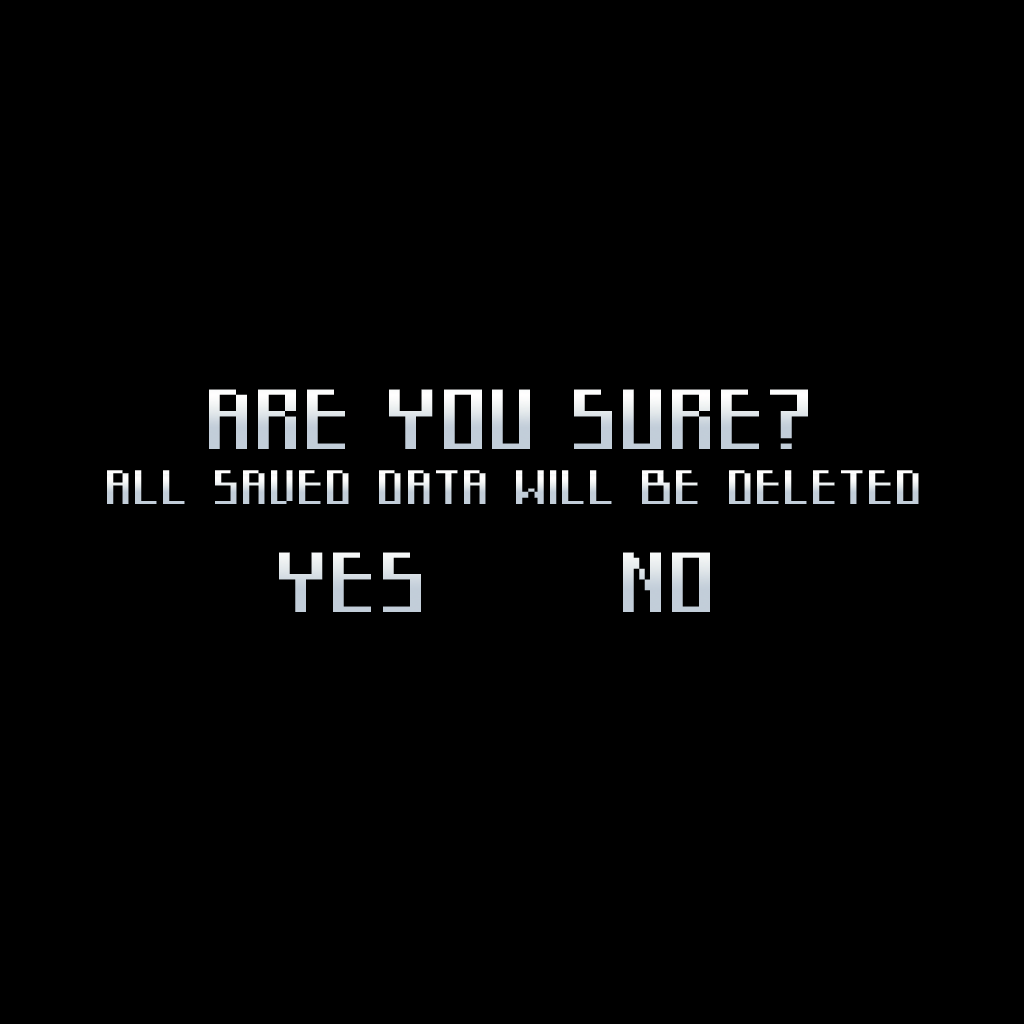
<style>
.page{position:relative;width:1024px;height:1024px;background:#000000}
.page>*{position:absolute;margin:0}
.t1{font:79.2px "Starcadia"}
.t2{font:60px "Starcadia"}
.t3{font:79.2px "Starcadia";color:#d3dbe2}
</style>
<div class="page">
<p class="t1" style="left:209px;top:389px;width:599px;height:60px">ARE YOU SURE?</p>
<p class="t2" style="left:107px;top:470px;width:812px;height:34px">all saved data will be deleted</p>
<p class="t3" style="left:279px;top:552px;width:142px;height:60px">YES</p>
<p class="t1" style="left:623px;top:552px;width:87px;height:60px">NO</p>
</div>
